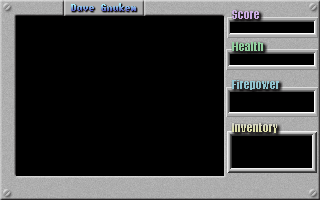
<style>
.page{position:relative;width:320px;height:200px;background:#000000}
.page>*{position:absolute;margin:0}
.t1{font:12px "Impact";color:#caade2}
.t2{font:12px "Impact";color:#92d09f}
.t3{font:12px "Impact";color:#92c4d0}
</style>
<div class="page">
<p class="t1" style="left:232px;top:10px;width:27px;height:9px">Score</p>
<p class="t2" style="left:232px;top:42px;width:31px;height:9px">Health</p>
<p class="t3" style="left:232px;top:80px;width:47px;height:10px">Firepower</p>
</div>
